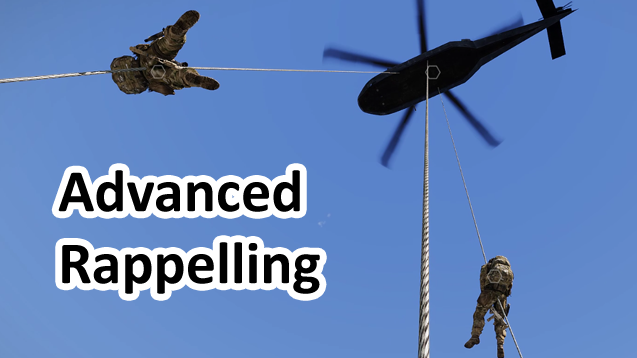
<style>
.page{position:relative;width:637px;height:358px}
.page>*{position:absolute;margin:0}
.t1{font:60px "Calibri-Bold";color:#000000}
</style>
<div class="page">
<p class="t1" style="left:58px;top:170px;width:262px;height:124px">Advanced <br>Rappelling</p>
</div>
